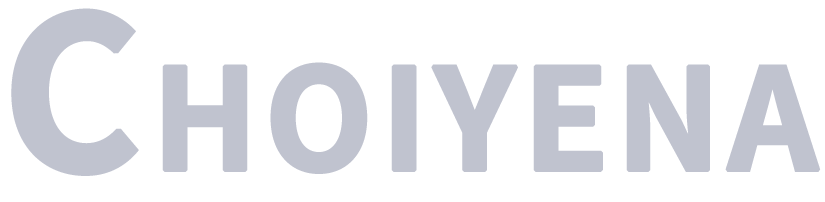
<style>
.page{position:relative;width:825px;height:202px;background:#ffffff}
.page>*{position:absolute;margin:0}
.t1{font:140px "NotoSansCJKkr-Bold";letter-spacing:0.025em;color:#c0c3cf;font-weight:bold}
.t2{font:210px "NotoSansCJKkr-Bold";letter-spacing:0.025em;color:#c0c3cf;font-weight:bold}
</style>
<div class="page">
<p class="t1" style="left:11px;top:8px;width:810px;height:168px"><span class="t2">C</span>HOIYENA</p>
</div>
